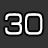
<style>
.page{position:relative;width:48px;height:48px;background:#333333}
.page>*{position:absolute;margin:0}
.t1{font:30.8px "EurostarRegularExtended";color:#ffffff;scale:0.71 1}
</style>
<div class="page">
<p class="t1" style="left:5px;top:13px;width:38px;height:22px">30</p>
</div>
